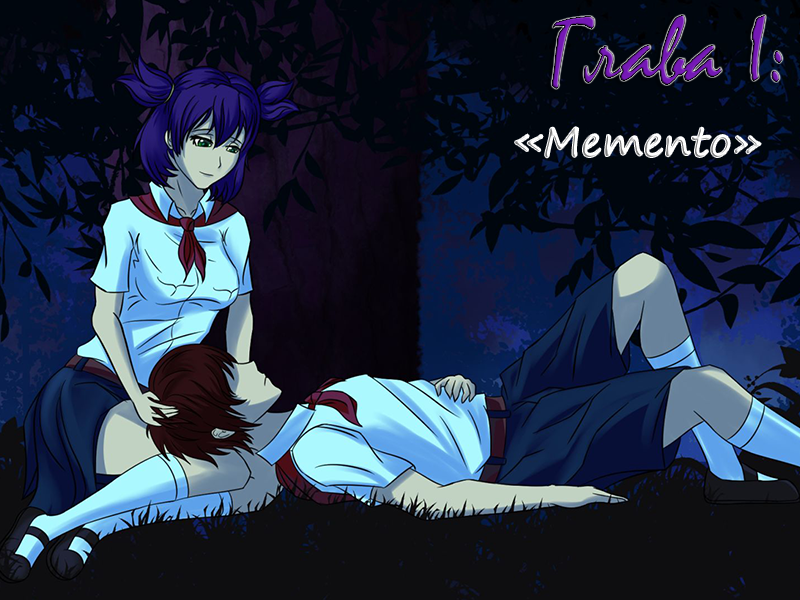
<style>
.page{position:relative;width:800px;height:600px}
.page>*{position:absolute;margin:0}
.t1{font:96px "Mistral"}
.t2{font:40.1px "SegoePrint"}
</style>
<div class="page">
<p class="t1" style="left:551px;top:15px;width:232px;height:74px">Глава I:</p>
<p class="t2" style="left:515px;top:127px;width:246px;height:31px">«Memento»</p>
</div>
